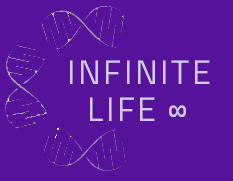
<style>
.page{position:relative;width:233px;height:181px;background:#57129b}
.page>*{position:absolute;margin:0}
.t1{font:34px "Cairo-Regular";letter-spacing:0.075em;color:#d3cbfb}
.t2{font:34px/57.1px "Cairo-Regular";letter-spacing:0.075em;color:#d3cbfb}
</style>
<div class="page">
<p class="t1" style="left:70px;top:60px;width:140px;height:24px">INFINITE</p>
<p class="t2" style="left:90px;top:97px;width:96px;height:24px;text-align:center">LIFE ∞<br>∞</p>
</div>
